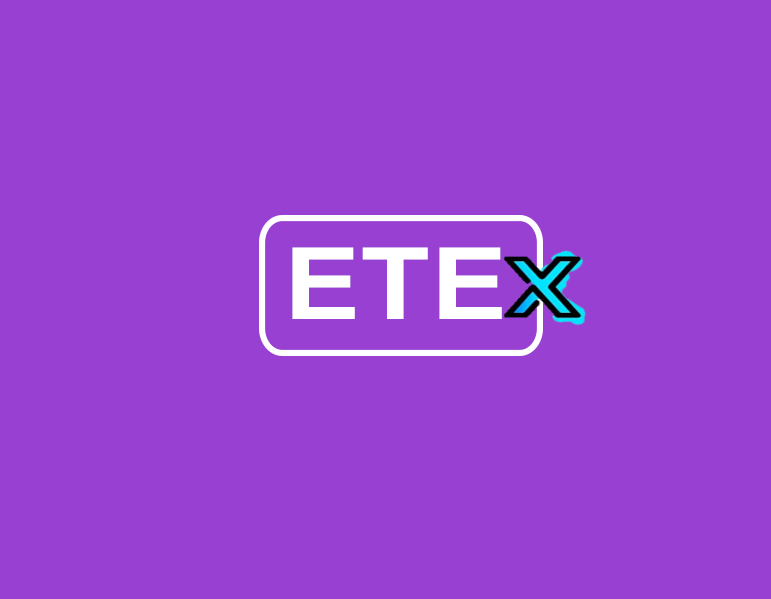
<style>
.page{position:relative;width:771px;height:599px;background:#9740d1}
.page>*{position:absolute;margin:0}
.t1{font:99.6px "Arial-BoldMT";color:#ffffff;scale:1.15 1}
</style>
<div class="page">
<p class="t1" style="left:292px;top:247px;width:210px;height:72px">ETE</p>
</div>
